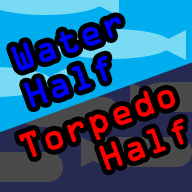
<style>
.page{position:relative;width:192px;height:192px;background:#00aeef}
.page>*{position:absolute;margin:0}
.t1{font:32px "OCRAStd";color:#0000ff;font-weight:bold}
.t2{font:32px "OCRAStd";color:#ff0000;font-weight:bold}
</style>
<div class="page">
<p class="t1" style="left:11px;top:17px;width:110px;height:90px;rotate:-20deg">Water<br>Half</p>
<p class="t2" style="left:19px;top:90px;width:165px;height:80px;text-align:right;rotate:-20deg">Torpedo<br>Half</p>
</div>
